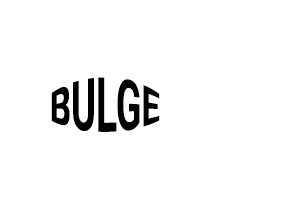
<style>
.page{position:relative;width:300px;height:200px;background:#ffffff}
.page>*{position:absolute;margin:0}
.t1{font:36px "Roboto-Bold";color:#000000}
</style>
<div class="page">
<p class="t1" style="left:51px;top:77px;width:109px;height:55px">BULGE</p>
</div>
